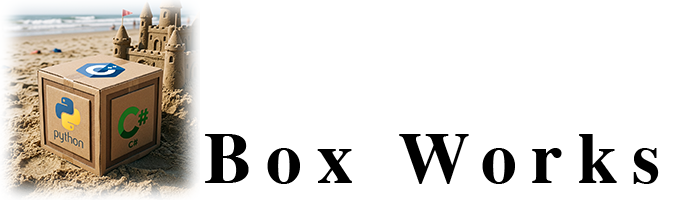
<style>
.page{position:relative;width:700px;height:200px;background:#ffffff}
.page>*{position:absolute;margin:0}
.t1{font:72px "Times-Bold";letter-spacing:0.2em;color:#000000}
</style>
<div class="page">
<p class="t1" style="left:205px;top:134px;width:454px;height:50px">Box Works</p>
</div>
